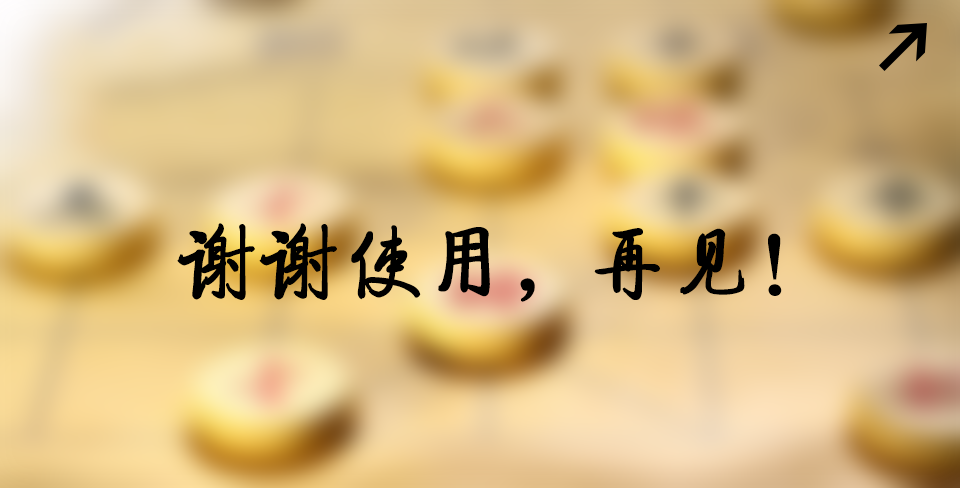
<style>
.page{position:relative;width:960px;height:488px}
.page>*{position:absolute;margin:0}
.t1{font:80px "FZQTJW--GB1-0";color:#000000;font-weight:bold}
</style>
<div class="page">
<p class="t1" style="left:177px;top:223px;width:605px;height:79px">谢谢使用，再见！</p>
</div>
